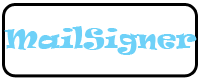
<style>
.page{position:relative;width:200px;height:80px;background:#ffffff}
.page>*{position:absolute;margin:0}
.t1{font:26px "Ravie";color:#6ed1f8}
</style>
<div class="page">
<p class="t1" style="left:4px;top:26px;width:193px;height:29px">MailSigner</p>
</div>
